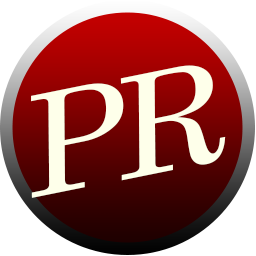
<style>
.page{position:relative;width:256px;height:256px;background:#ffffff}
.page>*{position:absolute;margin:0}
.t1{font:140.9px "Century";letter-spacing:-0.06em;color:#ffffea;scale:1.1 1}
</style>
<div class="page">
<p class="t1" style="left:31px;top:65px;width:195px;height:133px;rotate:-11deg">PR</p>
</div>
